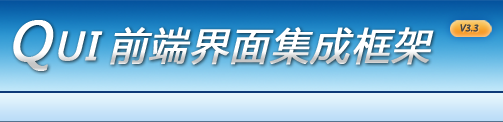
<style>
.page{position:relative;width:503px;height:122px}
.page>*{position:absolute;margin:0}
.t1{font:38px "MicrosoftYaHei";letter-spacing:0.05em;color:#ffffff;font-weight:bold;font-style:italic}
.t2{font:52px "MicrosoftYaHei";letter-spacing:0.05em;color:#ffffff;font-weight:bold;font-style:italic}
.t3{font:10px "MyriadPro-Regular";color:#404040;text-transform:uppercase;font-weight:bold;font-style:italic}
</style>
<div class="page">
<p class="t1" style="left:13px;top:20px;width:90px;height:51px"><span class="t2">Q</span>UI</p>
<p class="t1" style="left:110px;top:27px;width:324px;height:38px">前端界面集成框架</p>
<p class="t3" style="left:460px;top:24px;width:19px;height:8px">v3.3</p>
</div>
